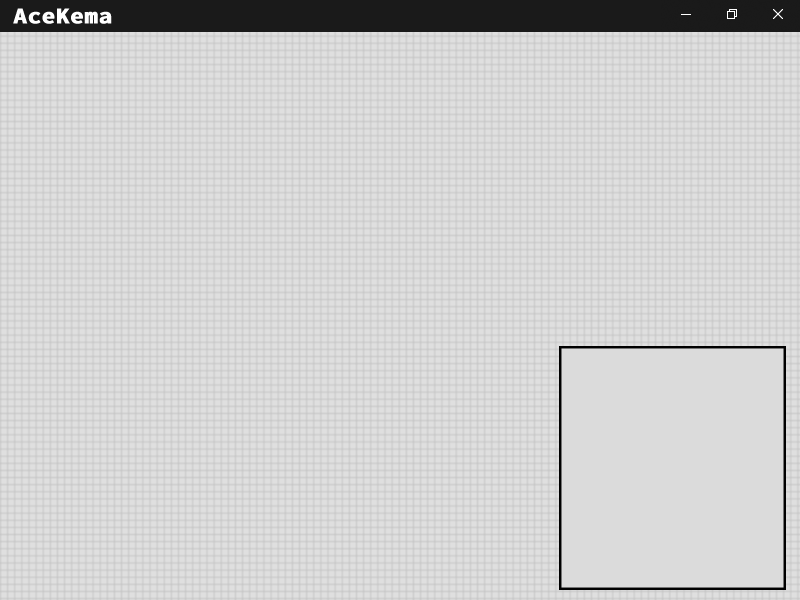
<style>
.page{position:relative;width:800px;height:600px;background:#dfdfdf}
.page>*{position:absolute;margin:0}
.t1{font:22.7px "SourceCodePro-Bold";color:#ffffff;font-weight:bold}
</style>
<div class="page">
<p class="t1" style="left:13px;top:8px;width:99px;height:16px">AceKema</p>
</div>
